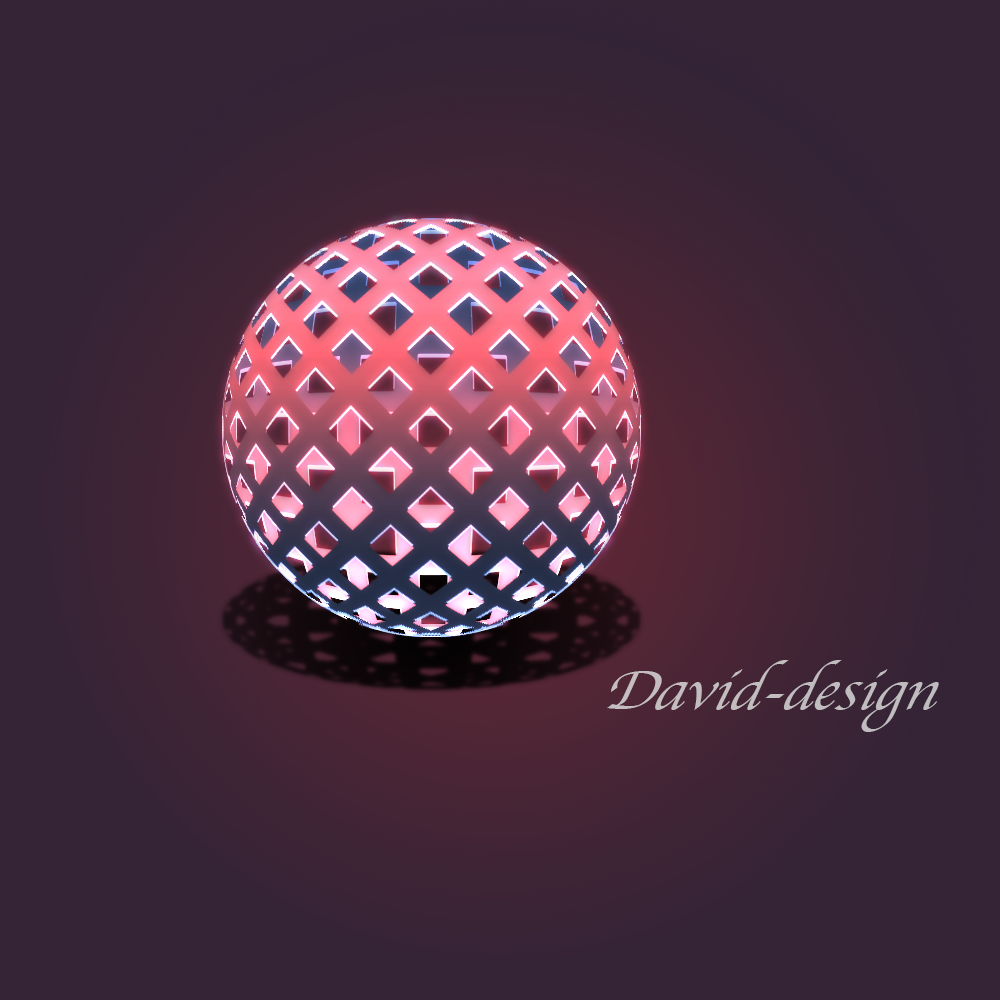
<style>
.page{position:relative;width:1000px;height:1000px}
.page>*{position:absolute;margin:0}
.t1{font:60.7px "Apple-Chancery";color:#c1bcbf}
</style>
<div class="page">
<p class="t1" style="left:607px;top:660px;width:332px;height:72px">David-design</p>
</div>
